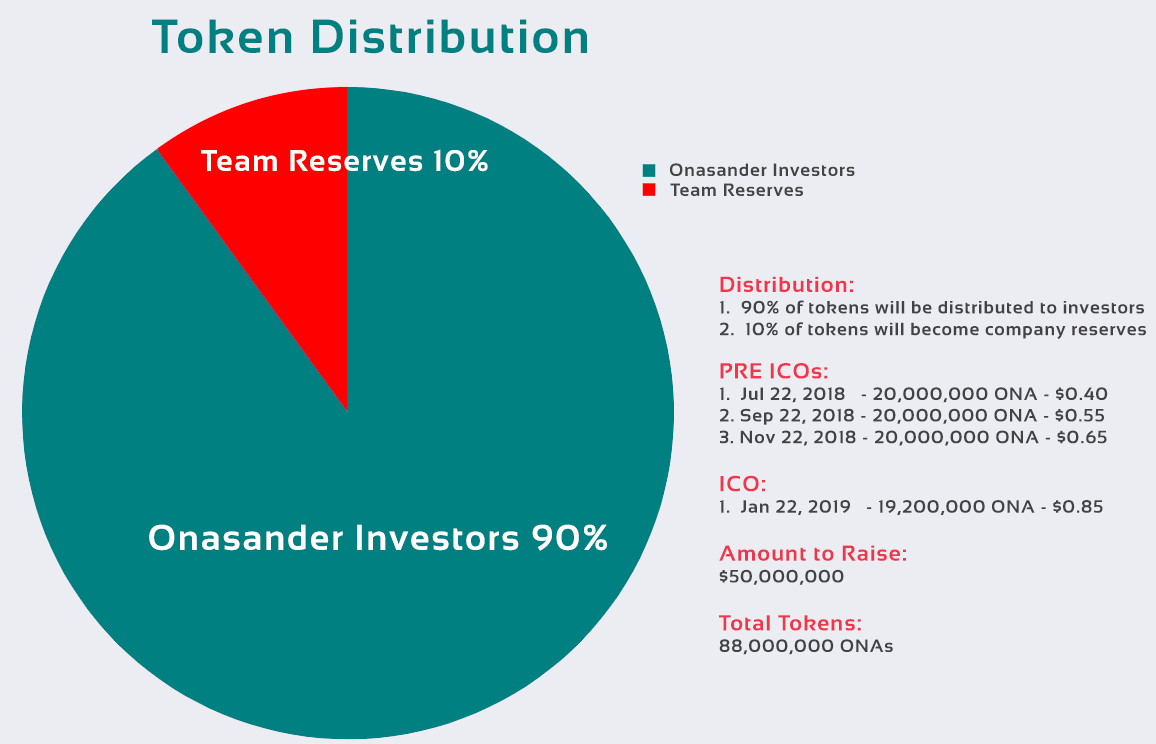
<style>
.page{position:relative;width:1156px;height:744px;background:#ecedf3}
.page>*{position:absolute;margin:0}
.t1{font:48px "Sansation-Bold";letter-spacing:0.05em;color:#008080}
.t2{font:30px "Sansation-Bold";letter-spacing:0.05em;color:#ffffff}
.t3{font:18px "Sansation-Bold";letter-spacing:0.05em;color:#444444}
.t4{font:18px "Sansation-Bold";letter-spacing:0.05em;color:#434244}
.t5{font:22px "Sansation-Bold";letter-spacing:0.05em;color:#ef364b}
.t6{font:36px "Sansation-Bold";letter-spacing:0.05em;color:#ffffff}
</style>
<div class="page">
<p class="t1" style="left:152px;top:19px;width:435px;height:35px">Token Distribution</p>
<p class="t2" style="left:201px;top:149px;width:287px;height:23px">Team Reserves 10%</p>
<p class="t3" style="left:670px;top:163px;width:185px;height:13px">Onasander Investors</p>
<p class="t3" style="left:670px;top:183px;width:133px;height:13px">Team Reserves</p>
<p class="t4" style="left:719px;top:276px;width:427px;height:379px"><span class="t5">Distribution:<br></span>1.  90% of tokens will be distributed to investors<br>2.  10% of tokens will become company reserves<br><br><span class="t5">PRE ICOs:<br></span>1.  Jul 22, 2018   - 20,000,000 ONA - $0.40<br>2. Sep 22, 2018 - 20,000,000 ONA - $0.55<br>3. Nov 22, 2018 - 20,000,000 ONA - $0.65<br><br><span class="t5">ICO:<br></span>1.  Jan 22, 2019   - 19,200,000 ONA - $0.85<br><br><span class="t5">Amount to Raise:<br></span>$50,000,000<br><br><span class="t5">Total Tokens:<br></span>88,000,000 ONAs</p>
<p class="t6" style="left:149px;top:524px;width:458px;height:27px">Onasander Investors 90%</p>
</div>
